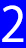
<style>
.page{position:relative;width:26px;height:48px;background:#0000ff}
.page>*{position:absolute;margin:0}
.t1{font:47.6px "KozGoPr6N-Regular";color:#ffffff}
</style>
<div class="page">
<p class="t1" style="left:2px;top:5px;width:22px;height:37px">2</p>
</div>
